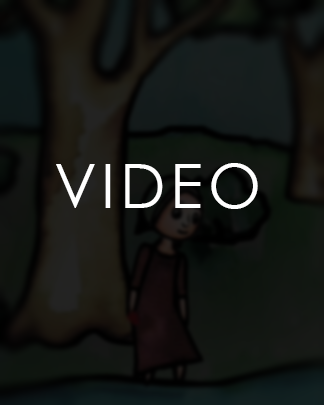
<style>
.page{position:relative;width:324px;height:405px}
.page>*{position:absolute;margin:0}
.t1{font:61.2px "CenturyGothic";letter-spacing:0.075em;color:#ffffff}
</style>
<div class="page">
<p class="t1" style="left:56px;top:163px;width:202px;height:46px">VIDEO</p>
</div>
